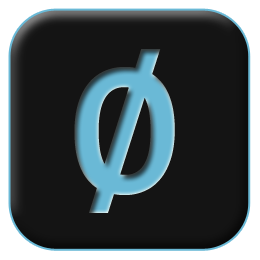
<style>
.page{position:relative;width:260px;height:260px;background:#141414}
.page>*{position:absolute;margin:0}
.t1{font:195px "Consolas-Bold";color:#6ab9d6}
</style>
<div class="page">
<p class="t1" style="left:74px;top:49px;width:101px;height:164px">Ø</p>
</div>
